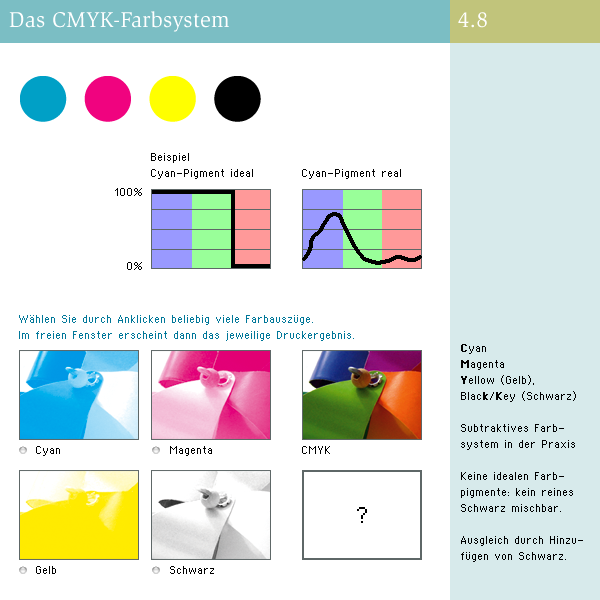
<style>
.page{position:relative;width:600px;height:600px;background:#ffffff}
.page>*{position:absolute;margin:0}
.t1{font:22px "Slimbach-Book";letter-spacing:0.01em;color:#ffffff}
.t2{font:22px "Slimbach-Book";color:#ffffff}
.t3{font:10px/16px "Supertext02";color:#000000}
.t4{font:10px "Supertext02";color:#000000}
.t5{font:10px/14px "Supertext02";color:#000000}
.t6{font:10px/16px "Supertext02";color:#007799}
.t7{font:10px/16px "Supertext02Bold";color:#000000}
</style>
<div class="page">
<p class="t1" style="left:9px;top:11px;width:220px;height:21px">Das CMYK-Farbsystem</p>
<p class="t2" style="left:458px;top:12px;width:29px;height:16px">4.8</p>
<p class="t3" style="left:151px;top:153px;width:102px;height:26px">Beispiel<br>Cyan-Pigment ideal</p>
<p class="t4" style="left:302px;top:169px;width:99px;height:10px">Cyan-Pigment real</p>
<p class="t5" style="left:115px;top:188px;width:27px;height:82px;text-align:right">100%<br><br><br><br><br>0%</p>
<p class="t6" style="left:19px;top:315px;width:335px;height:26px">Wählen Sie durch Anklicken beliebig viele Farbauszüge. <br>Im freien Fenster erscheint dann das jeweilige Druckergebnis.</p>
<p class="t3" style="left:461px;top:344px;width:122px;height:218px"><span class="t7">C</span>yan<br><span class="t7">M</span>agenta<br><span class="t7">Y</span>ellow (Gelb), <br>Blac<span class="t7">k</span>/<span class="t7">K</span>ey (Schwarz)<br><br>Subtraktives Farb-<br>system in der Praxis<br><br>Keine idealen Farb-<br>pigmente: kein reines <br>Schwarz mischbar.<br><br>Ausgleich durch Hinzu-<br>fügen von Schwarz.</p>
<p class="t4" style="left:36px;top:446px;width:24px;height:10px">Cyan</p>
<p class="t4" style="left:170px;top:446px;width:42px;height:10px">Magenta</p>
<p class="t4" style="left:302px;top:446px;width:28px;height:8px">CMYK</p>
<p class="t4" style="left:36px;top:566px;width:20px;height:8px">Gelb</p>
<p class="t4" style="left:170px;top:566px;width:44px;height:8px">Schwarz</p>
</div>
